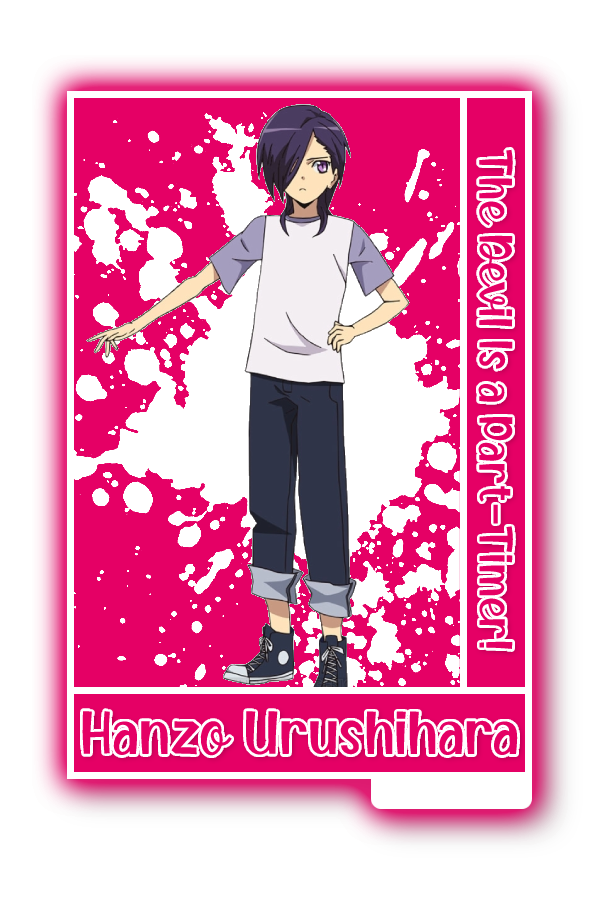
<style>
.page{position:relative;width:600px;height:900px;background:#ffffff}
.page>*{position:absolute;margin:0}
.t1{font:48.8px "ButterFood";color:#e50065}
.t2{font:63.2px "ButterFood";color:#e50065}
</style>
<div class="page">
<p class="t1" style="left:478px;top:149px;width:37px;height:500px;rotate:90deg">The Devil Is a Part-Timer!</p>
<p class="t2" style="left:82px;top:711px;width:436px;height:45px">Hanzo Urushihara</p>
</div>
